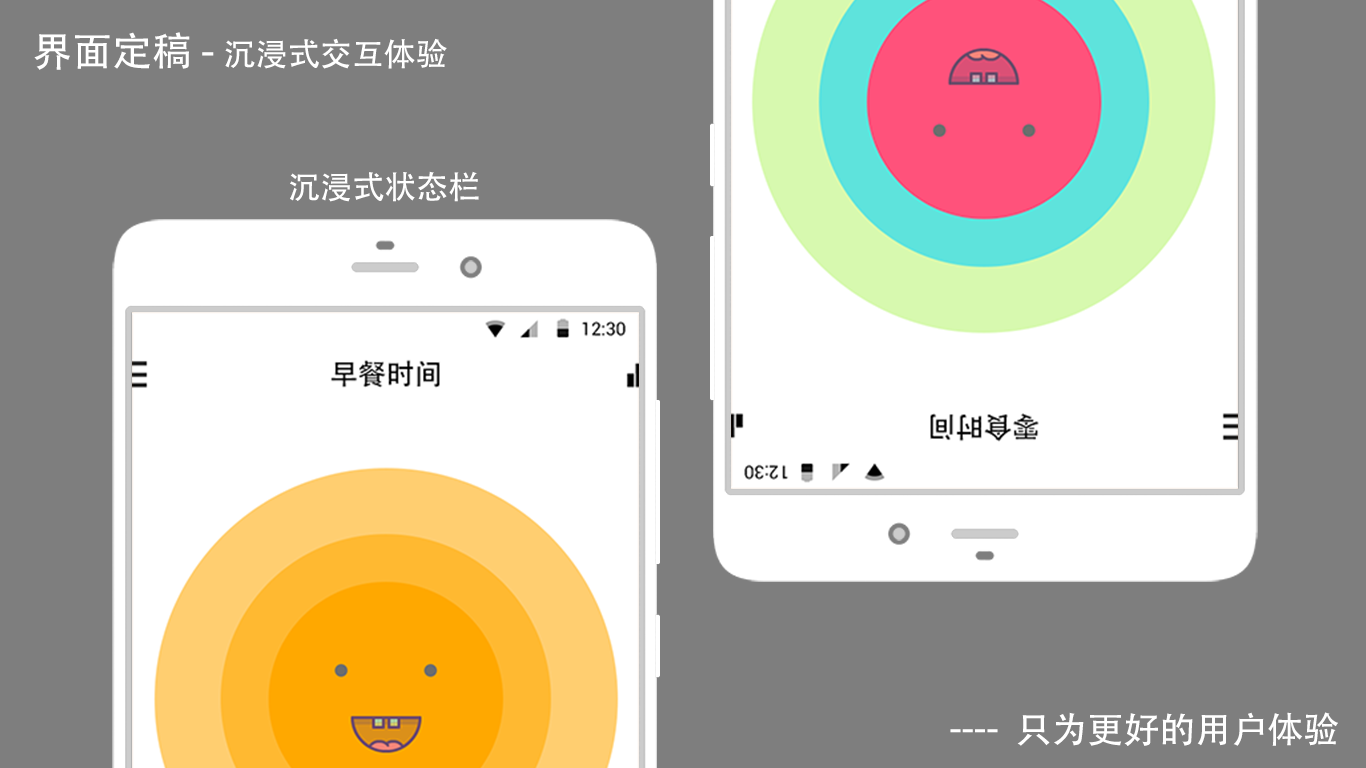
<style>
.page{position:relative;width:1366px;height:768px;background:#7e7e7e}
.page>*{position:absolute;margin:0}
.t1{font:32px "AdobeHeitiStd-Regular";color:#ffffff}
.t2{font:40px "AdobeHeitiStd-Regular";color:#ffffff}
.t3{font:36px "AdobeHeitiStd-Regular";color:#ffffff}
</style>
<div class="page">
<p class="t1" style="left:34px;top:32px;width:413px;height:38px"><span class="t2">界面定稿 - </span>沉浸式交互体验</p>
<p class="t1" style="left:290px;top:171px;width:189px;height:31px">沉浸式状态栏</p>
<p class="t3" style="left:1017px;top:712px;width:321px;height:34px">只为更好的用户体验</p>
<p class="t3" style="left:950px;top:729px;width:48px;height:4px">----</p>
</div>
